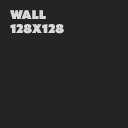
<style>
.page{position:relative;width:128px;height:128px;background:#242424}
.page>*{position:absolute;margin:0}
.t1{font:12px "AzoSansUber-Regular";color:#d7d7d7}
</style>
<div class="page">
<p class="t1" style="left:10px;top:10px;width:54px;height:24px">Wall<br>128x128</p>
</div>
